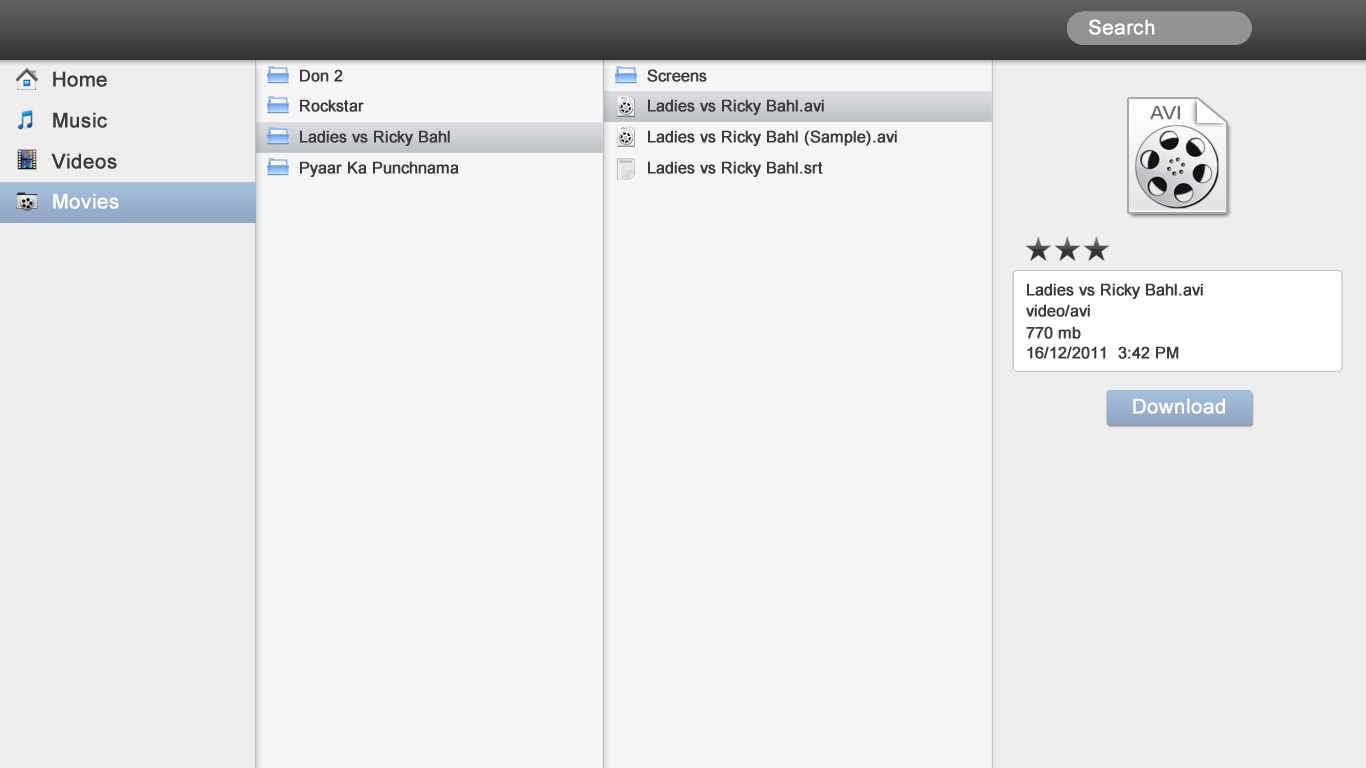
<style>
.page{position:relative;width:1366px;height:768px;background:#f6f6f6}
.page>*{position:absolute;margin:0}
.t1{font:20px "ArialMT";color:#ffffff;font-weight:bold}
.t2{font:20px "ArialMT";color:#3c3c3c;font-weight:bold}
.t3{font:16px "ArialMT";color:#3c3c3c;font-weight:bold}
</style>
<div class="page">
<p class="t1" style="left:1089px;top:19px;width:66px;height:16px">Search</p>
<p class="t2" style="left:53px;top:71px;width:54px;height:16px">Home</p>
<p class="t3" style="left:300px;top:69px;width:43px;height:13px">Don 2</p>
<p class="t3" style="left:647px;top:69px;width:60px;height:13px">Screens</p>
<p class="t3" style="left:300px;top:99px;width:64px;height:13px">Rockstar</p>
<p class="t3" style="left:648px;top:99px;width:176px;height:16px">Ladies vs Ricky Bahl.avi</p>
<p class="t2" style="left:53px;top:112px;width:54px;height:16px">Music</p>
<p class="t3" style="left:300px;top:130px;width:150px;height:16px">Ladies vs Ricky Bahl</p>
<p class="t3" style="left:648px;top:130px;width:249px;height:16px">Ladies vs Ricky Bahl (Sample).avi</p>
<p class="t2" style="left:51px;top:153px;width:66px;height:16px">Videos</p>
<p class="t3" style="left:300px;top:161px;width:159px;height:16px">Pyaar Ka Punchnama</p>
<p class="t3" style="left:648px;top:161px;width:175px;height:16px">Ladies vs Ricky Bahl.srt</p>
<p class="t1" style="left:53px;top:193px;width:66px;height:16px">Movies</p>
<p class="t3" style="left:1027px;top:283px;width:176px;height:16px">Ladies vs Ricky Bahl.avi</p>
<p class="t3" style="left:1026px;top:304px;width:64px;height:13px">video/avi</p>
<p class="t3" style="left:1026px;top:326px;width:55px;height:13px">770 mb</p>
<p class="t3" style="left:1027px;top:346px;width:152px;height:13px">16/12/2011  3:42 PM</p>
<p class="t1" style="left:1133px;top:398px;width:92px;height:16px">Download</p>
</div>
